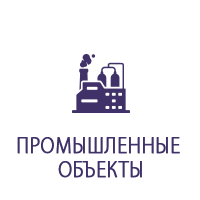
<style>
.page{position:relative;width:200px;height:200px;background:#ffffff}
.page>*{position:absolute;margin:0}
.t1{font:23.9px/38.2px "MyriadPro-Light";letter-spacing:0.025em;color:#403168;font-variant:small-caps;font-weight:bold;scale:0.85 1}
.t2{font:23.9px/24px "MyriadPro-Light";letter-spacing:0.025em;color:#403168;font-variant:small-caps;font-weight:bold;scale:0.85 1}
</style>
<div class="page">
<p class="t1" style="left:17px;top:137px;width:163px;height:41px;text-align:center">ПРОМЫШЛЕННЫЕ <br><span class="t2">ОБЪЕКТЫ</span></p>
</div>
